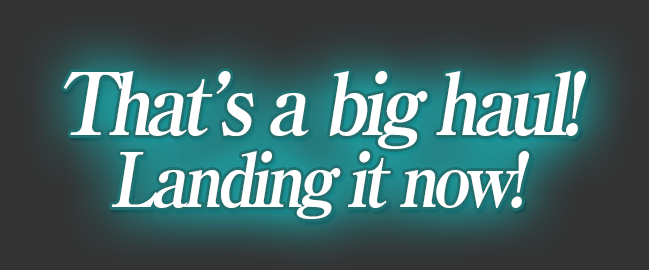
<style>
.page{position:relative;width:649px;height:270px}
.page>*{position:absolute;margin:0}
.t1{font:86px/81px "RyuminPro-ExBold";letter-spacing:-0.08em;color:#ffffff;font-style:italic;scale:0.9 1}
.t2{font:76px/81px "RyuminPro-ExBold";letter-spacing:-0.08em;color:#ffffff;font-style:italic;scale:0.9 1}
</style>
<div class="page">
<p class="t1" style="left:63px;top:71px;width:523px;height:148px;text-align:center">That’s a big haul!<br><span class="t2">Landing it now!</span></p>
</div>
